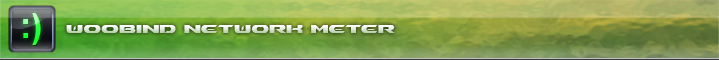
<style>
.page{position:relative;width:719px;height:60px}
.page>*{position:absolute;margin:0}
.t1{font:16px "Ben-Pioneer-Bold"}
</style>
<div class="page">
<p class="t1" style="left:66px;top:25px;width:329px;height:8px">Woobind Network Meter</p>
</div>
